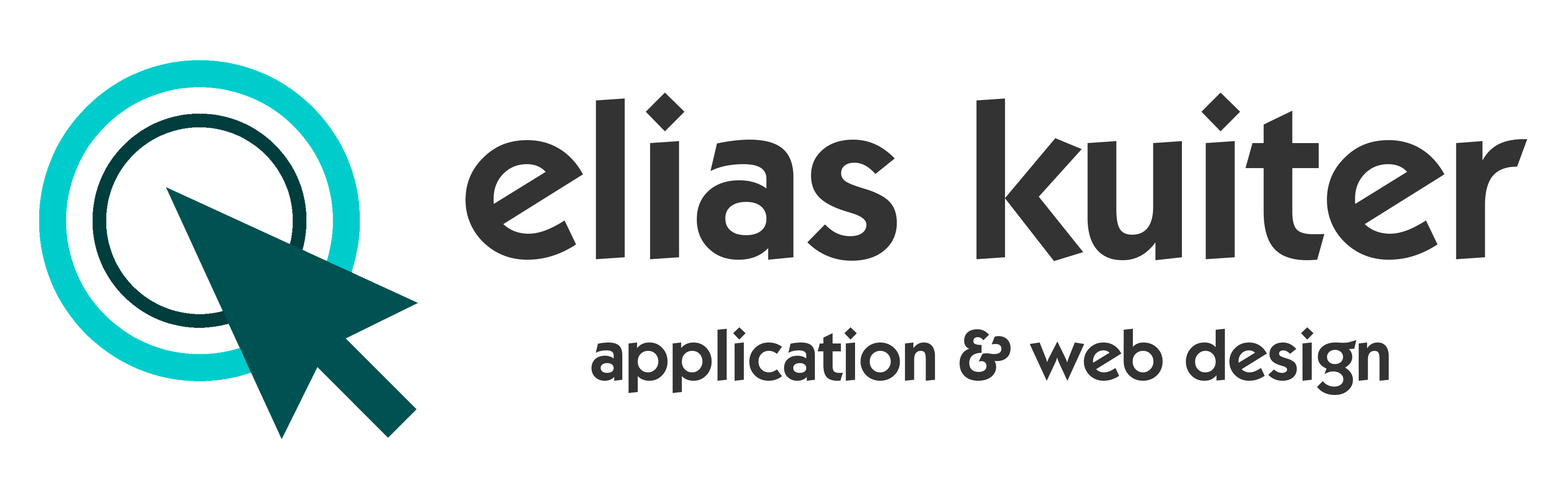
<style>
.page{position:relative;width:1568px;height:490px;background:#ffffff}
.page>*{position:absolute;margin:0}
.t1{font:71.5px/122.5px "KabelITCbyBT-Demi";color:#333333}
.t2{font:224.6px/122.5px "KabelITCbyBT-Demi";color:#333333}
</style>
<div class="page">
<p class="t1" style="left:466px;top:93px;width:1061px;height:302px;text-align:center"><span class="t2">elias kuiter<br></span>application &amp; web design</p>
</div>
